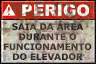
<style>
.page{position:relative;width:96px;height:64px}
.page>*{position:absolute;margin:0}
.t1{font:16px "Arial-Black"}
.t2{font:9px/10px "Verdana-Bold";text-transform:uppercase}
</style>
<div class="page">
<p class="t1" style="left:22px;top:4px;width:67px;height:13px">PERIGO</p>
<p class="t2" style="left:4px;top:20px;width:88px;height:40px;text-align:center">SAIA DA ÁREA<br>DURANTE O<br>FUNCIONAMENTO<br>DO ELEVADOR</p>
</div>
